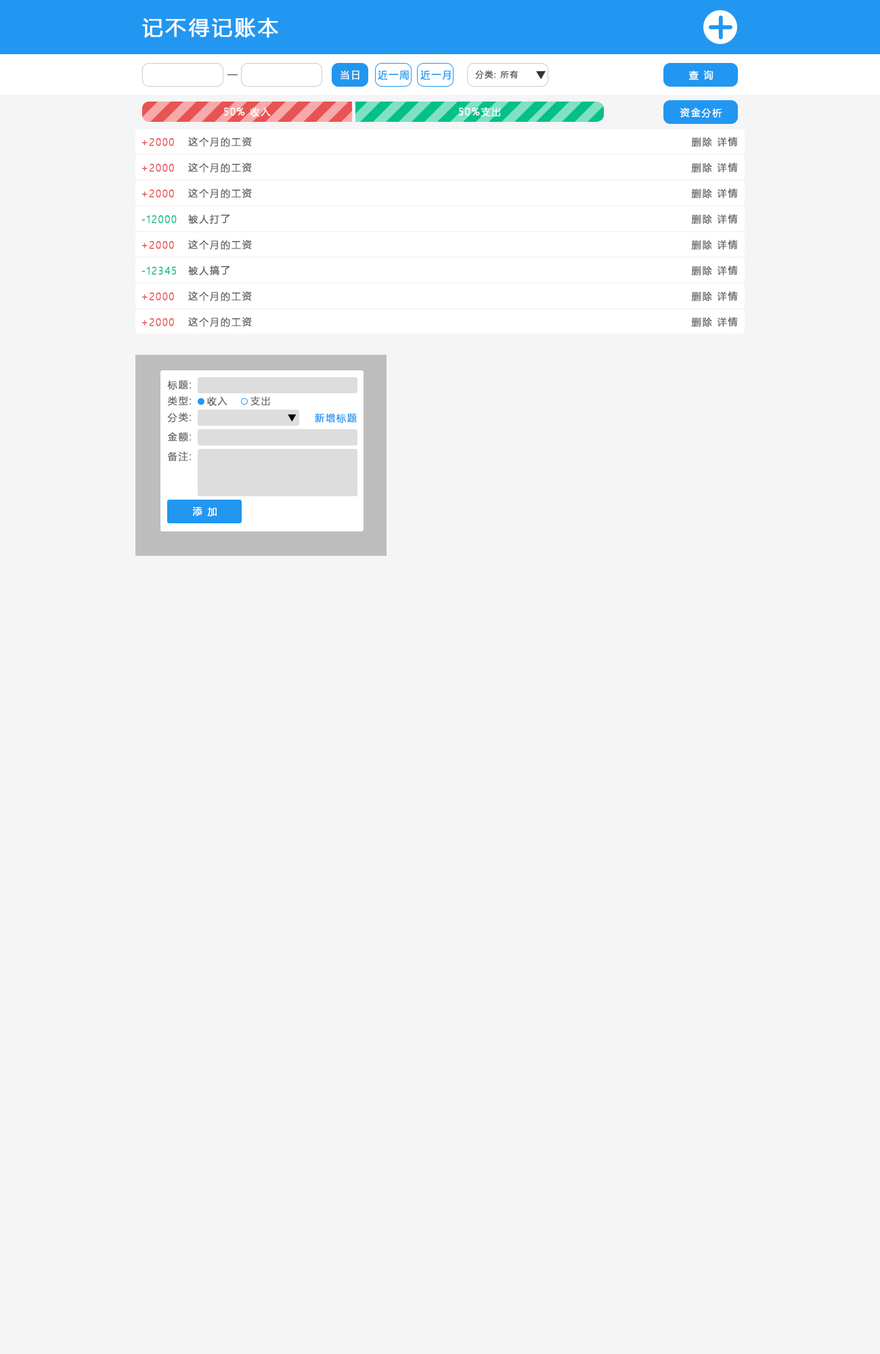
<style>
.page{position:relative;width:880px;height:1354px;background:#f5f5f5}
.page>*{position:absolute;margin:0}
.t1{font:20.3px "MicrosoftYaHei";letter-spacing:0.11em;color:#fffffe;font-weight:bold}
.t2{font:9.5px "MicrosoftYaHeiLight";letter-spacing:0.11em;color:#fefefe;font-weight:bold}
.t3{font:9.5px "MicrosoftYaHeiLight";letter-spacing:0.11em;color:#2197f1;font-weight:bold}
.t4{font:8.1px "MicrosoftYaHeiLight";letter-spacing:0.11em;color:#666666;font-weight:bold}
.t5{font:9.5px "MicrosoftYaHeiLight";letter-spacing:0.11em;color:#ffffff;font-weight:bold}
.t6{font:9.5px "MicrosoftYaHeiLight";letter-spacing:0.11em;color:#666666;font-weight:bold}
.t7{font:9.5px "MicrosoftYaHeiLight";letter-spacing:0.11em;color:#e85353;font-weight:bold}
.t8{font:9.5px "MicrosoftYaHeiLight";letter-spacing:0.11em;color:#03c087;font-weight:bold}
</style>
<div class="page">
<p class="t1" style="left:142px;top:18px;width:136px;height:20px">记不得记账本</p>
<p class="t2" style="left:341px;top:70px;width:19px;height:10px">当日</p>
<p class="t3" style="left:378px;top:70px;width:31px;height:10px">近一周</p>
<p class="t3" style="left:421px;top:70px;width:30px;height:10px">近一月</p>
<p class="t4" style="left:475px;top:70px;width:44px;height:9px">分类: 所有</p>
<p class="t2" style="left:689px;top:70px;width:25px;height:10px">查 询</p>
<p class="t5" style="left:224px;top:108px;width:47px;height:9px">50% 收入</p>
<p class="t5" style="left:459px;top:107px;width:41px;height:10px">50%支出</p>
<p class="t2" style="left:680px;top:108px;width:43px;height:10px">资金分析</p>
<p class="t6" style="left:188px;top:137px;width:64px;height:10px">这个月的工资</p>
<p class="t6" style="left:691px;top:137px;width:47px;height:10px">删除 详情</p>
<p class="t7" style="left:142px;top:138px;width:32px;height:8px">+2000</p>
<p class="t7" style="left:142px;top:164px;width:32px;height:8px">+2000</p>
<p class="t6" style="left:188px;top:163px;width:64px;height:10px">这个月的工资</p>
<p class="t6" style="left:691px;top:163px;width:47px;height:10px">删除 详情</p>
<p class="t7" style="left:142px;top:190px;width:32px;height:8px">+2000</p>
<p class="t6" style="left:188px;top:188px;width:64px;height:10px">这个月的工资</p>
<p class="t6" style="left:691px;top:188px;width:47px;height:10px">删除 详情</p>
<p class="t8" style="left:142px;top:215px;width:35px;height:8px">-12000</p>
<p class="t6" style="left:188px;top:215px;width:42px;height:9px">被人打了</p>
<p class="t6" style="left:691px;top:214px;width:47px;height:10px">删除 详情</p>
<p class="t7" style="left:142px;top:241px;width:32px;height:8px">+2000</p>
<p class="t6" style="left:188px;top:240px;width:64px;height:10px">这个月的工资</p>
<p class="t6" style="left:691px;top:240px;width:47px;height:10px">删除 详情</p>
<p class="t8" style="left:142px;top:267px;width:35px;height:8px">-12345</p>
<p class="t6" style="left:188px;top:265px;width:42px;height:11px">被人搞了</p>
<p class="t6" style="left:691px;top:265px;width:47px;height:11px">删除 详情</p>
<p class="t7" style="left:142px;top:293px;width:32px;height:8px">+2000</p>
<p class="t6" style="left:188px;top:291px;width:64px;height:10px">这个月的工资</p>
<p class="t6" style="left:691px;top:291px;width:47px;height:10px">删除 详情</p>
<p class="t6" style="left:188px;top:317px;width:64px;height:10px">这个月的工资</p>
<p class="t6" style="left:691px;top:317px;width:47px;height:10px">删除 详情</p>
<p class="t7" style="left:142px;top:318px;width:32px;height:8px">+2000</p>
<p class="t6" style="left:167px;top:381px;width:24px;height:9px">标题:</p>
<p class="t6" style="left:167px;top:396px;width:24px;height:10px">类型:</p>
<p class="t6" style="left:207px;top:397px;width:21px;height:9px">收入</p>
<p class="t6" style="left:251px;top:396px;width:19px;height:10px">支出</p>
<p class="t6" style="left:167px;top:412px;width:24px;height:11px">分类:</p>
<p class="t3" style="left:315px;top:413px;width:42px;height:10px">新增标题</p>
<p class="t6" style="left:167px;top:432px;width:24px;height:10px">金额:</p>
<p class="t6" style="left:167px;top:452px;width:24px;height:10px">备注:</p>
<p class="t5" style="left:192px;top:507px;width:25px;height:10px">添 加</p>
</div>
